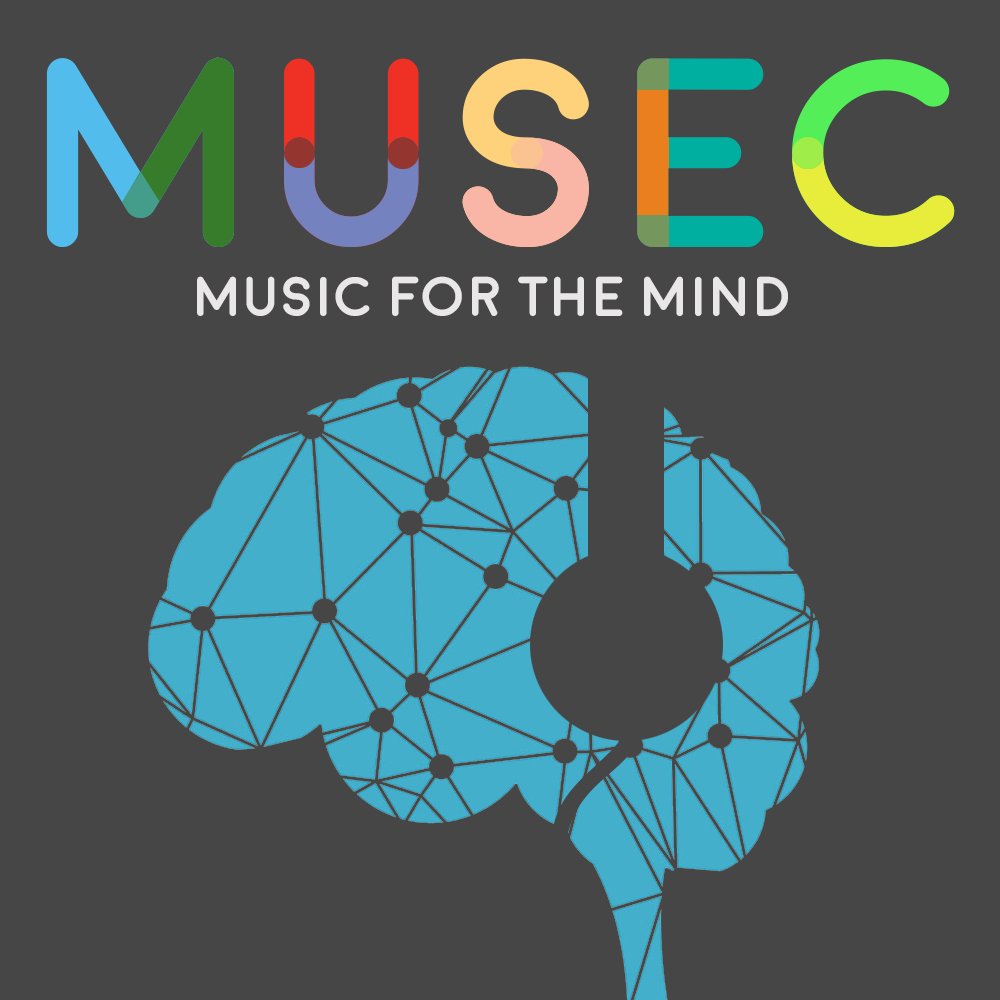
<style>
.page{position:relative;width:1000px;height:1000px;background:#464646}
.page>*{position:absolute;margin:0}
.t1{font:22px "Moon-Bold";color:#e9e7e8}
</style>
<div class="page">
<p class="t1" style="left:197px;top:276px;width:591px;height:40px">Music for the mind</p>
</div>
